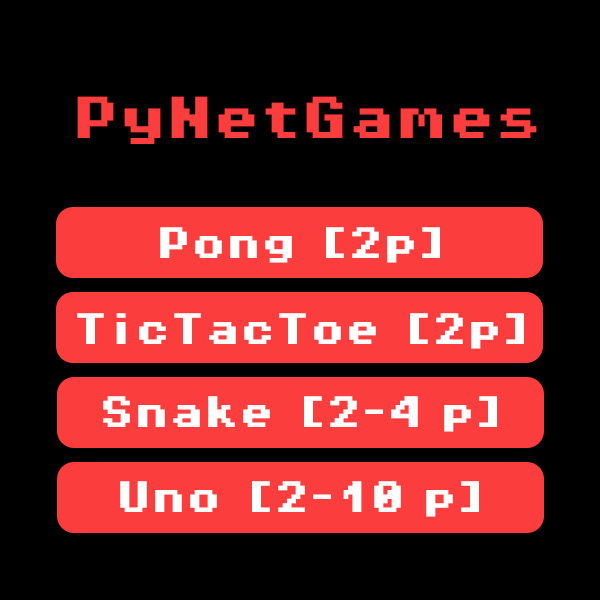
<style>
.page{position:relative;width:600px;height:600px;background:#000000}
.page>*{position:absolute;margin:0}
.t1{font:47px "PixelOperator8-Bold";color:#fb3d3d}
.t2{font:35px "PixelOperator8-Bold";color:#ffffff}
</style>
<div class="page">
<p class="t1" style="left:77px;top:96px;width:460px;height:48px">PyNetGames</p>
<p class="t2" style="left:160px;top:227px;width:280px;height:36px">Pong [2p]</p>
<p class="t2" style="left:77px;top:313px;width:447px;height:36px">TicTacToe [2p]</p>
<p class="t2" style="left:103px;top:396px;width:394px;height:36px">Snake [2-4 p]</p>
<p class="t2" style="left:120px;top:481px;width:359px;height:36px">Uno [2-10 p]</p>
</div>
